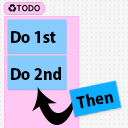
<style>
.page{position:relative;width:128px;height:128px;background:#f5f5f5}
.page>*{position:absolute;margin:0}
.t1{font:15.6px "KozGoPr6N-Heavy";color:#000000}
</style>
<div class="page">
<p class="t1" style="left:11px;top:31px;width:45px;height:12px">Do 1st</p>
<p class="t1" style="left:11px;top:67px;width:50px;height:13px">Do 2nd</p>
<p class="t1" style="left:76px;top:94px;width:38px;height:15px;rotate:-11deg">Then</p>
</div>
